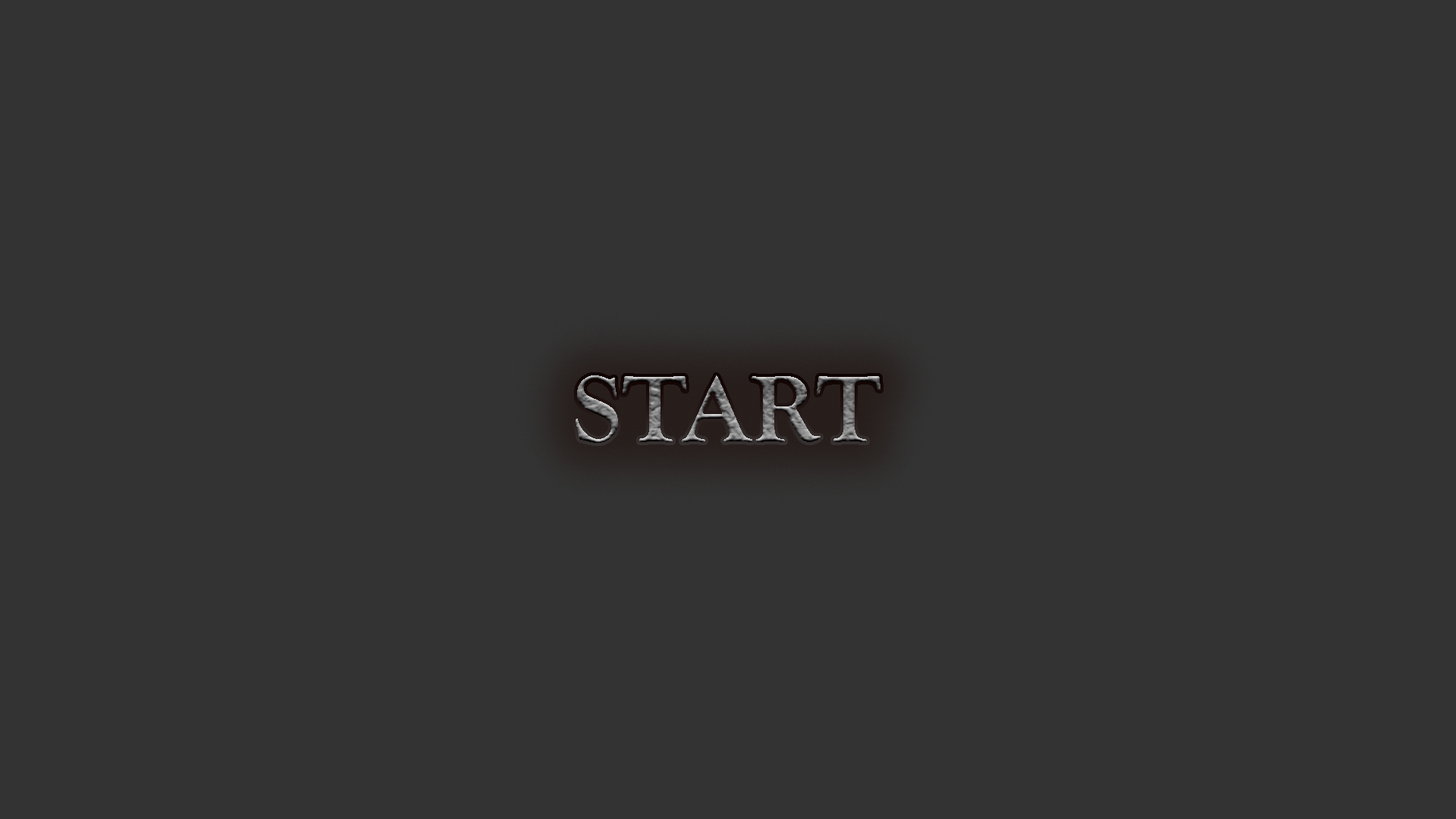
<style>
.page{position:relative;width:1456px;height:819px;background:#333333}
.page>*{position:absolute;margin:0}
.t1{font:98.6px "GoudyOldStyleT-Bold"}
</style>
<div class="page">
<p class="t1" style="left:576px;top:375px;width:304px;height:68px">START</p>
</div>
